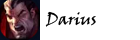
<style>
.page{position:relative;width:140px;height:40px;background:#ffffff}
.page>*{position:absolute;margin:0}
.t1{font:12px "VinerHandITC";color:#000000}
</style>
<div class="page">
<p class="t1" style="left:45px;top:11px;width:51px;height:16px">Darius</p>
</div>
